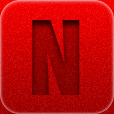
<style>
.page{position:relative;width:114px;height:114px}
.page>*{position:absolute;margin:0}
.t1{font:100px "HelveticaLT-Condensed-Black";letter-spacing:0.075em}
</style>
<div class="page">
<p class="t1" style="left:32px;top:20px;width:48px;height:75px">N</p>
</div>
